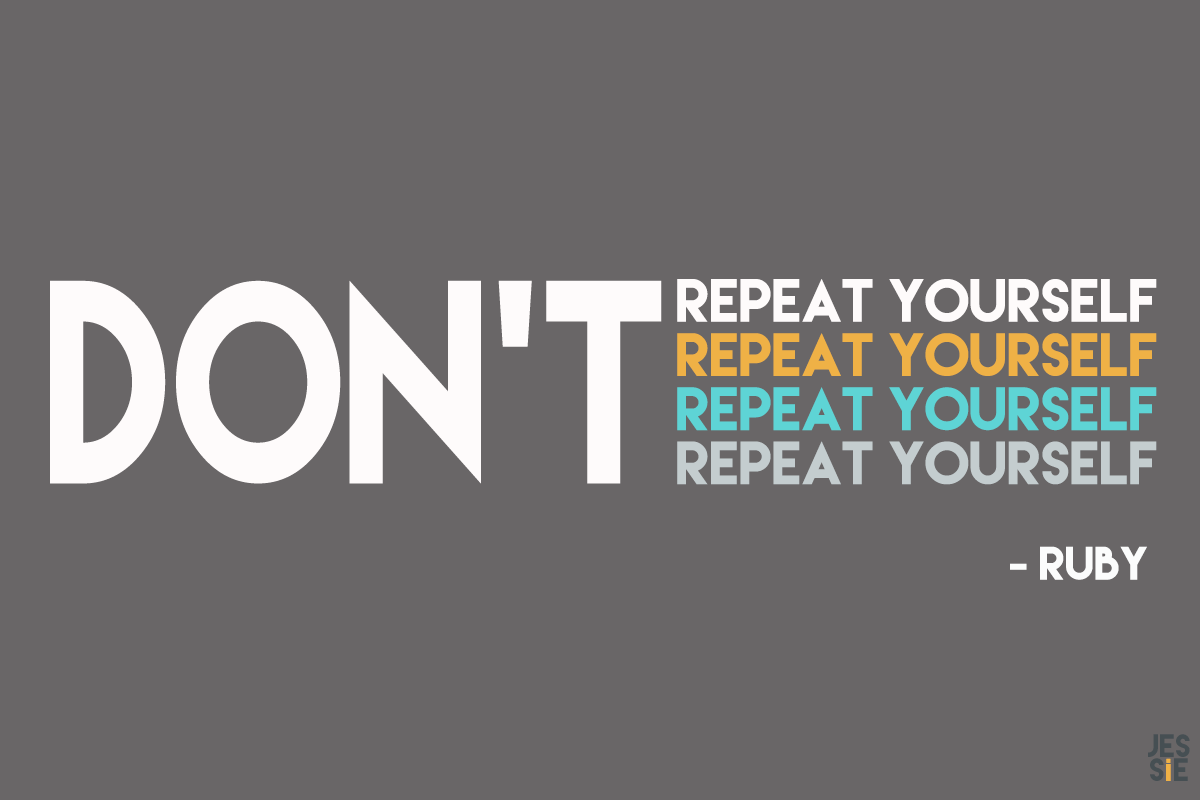
<style>
.page{position:relative;width:1200px;height:800px;background:#696667}
.page>*{position:absolute;margin:0}
.t1{font:54.2px/54.2px "LemonMilk";color:#fefbfb}
.t2{font:54.2px/54.2px "LemonMilk";color:#efb146}
.t3{font:54.2px/54.2px "LemonMilk";color:#5ed4d5}
.t4{font:54.2px/54.2px "LemonMilk";color:#c4cdcf}
.t5{font:41.7px "LemonMilk";color:#fbfcfc}
.t6{font:28.9px/24.1px "LemonMilk";color:#464f53}
.t7{font:28.9px/24.1px "PoplarStd";color:#efb146}
</style>
<div class="page">
<p class="t1" style="left:677px;top:279px;width:480px;height:206px">repeat yourself<br><span class="t2">repeat yourself<br></span><span class="t3">repeat yourself<br></span><span class="t4">repeat yourself</span></p>
<p class="t5" style="left:1010px;top:546px;width:137px;height:34px">- Ruby</p>
<p class="t6" style="left:1148px;top:734px;width:42px;height:47px;text-align:center">jes<br>s<span class="t7">i </span>e</p>
</div>
